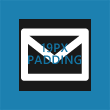
<style>
.page{position:relative;width:110px;height:110px;background:#1c80b0}
.page>*{position:absolute;margin:0}
.t1{font:12px/12px "SegoeWP-Semibold";letter-spacing:0.025em;color:#1372a0;text-transform:uppercase}
</style>
<div class="page">
<p class="t1" style="left:28px;top:43px;width:54px;height:22px;text-align:center">19px<br>padding</p>
</div>
